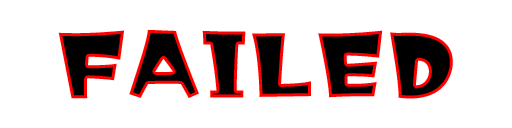
<style>
.page{position:relative;width:512px;height:128px;background:#ffffff}
.page>*{position:absolute;margin:0}
.t1{font:90px "Memoir-Square";color:#000000}
</style>
<div class="page">
<p class="t1" style="left:58px;top:29px;width:395px;height:70px">FAILED</p>
</div>
